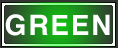
<style>
.page{position:relative;width:118px;height:48px}
.page>*{position:absolute;margin:0}
.t1{font:28px "Helvetica-Bold";letter-spacing:0.065em;color:#ffffff}
</style>
<div class="page">
<p class="t1" style="left:5px;top:14px;width:105px;height:22px">GREEN</p>
</div>
